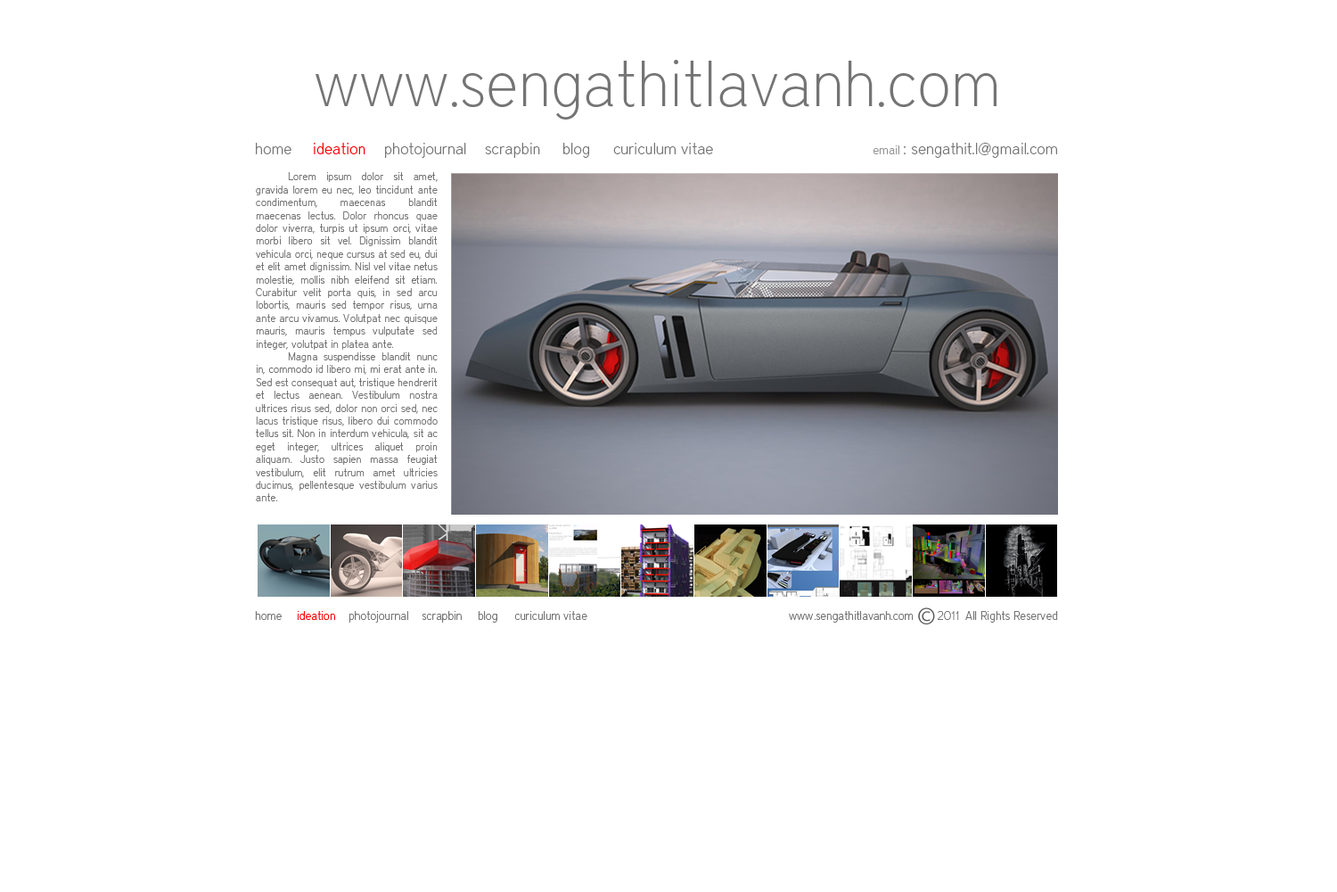
<style>
.page{position:relative;width:1337px;height:892px;background:#ffffff}
.page>*{position:absolute;margin:0}
.t1{font:64.2px "DistrictThin";color:#747474}
.t2{font:16px "DistrictThin";color:#747474}
.t3{font:16px "DistrictThin";color:#ff0000}
.t4{font:12.5px "DistrictThin";color:#939393}
.t5{font:10.7px "DistrictThin";color:#747474}
.t6{font:11.6px "DistrictThin";color:#747474}
.t7{font:11.6px "DistrictThin";color:#ff0000}
</style>
<div class="page">
<p class="t1" style="left:316px;top:60px;width:681px;height:59px">www.sengathitlavanh.com</p>
<p class="t2" style="left:256px;top:143px;width:36px;height:11px">home</p>
<p class="t3" style="left:314px;top:143px;width:52px;height:11px">ideation</p>
<p class="t2" style="left:385px;top:143px;width:81px;height:15px">photojournal</p>
<p class="t2" style="left:485px;top:143px;width:55px;height:15px">scrapbin</p>
<p class="t2" style="left:563px;top:143px;width:26px;height:15px">blog</p>
<p class="t2" style="left:613px;top:143px;width:100px;height:11px">curiculum vitae</p>
<p class="t2" style="left:873px;top:143px;width:184px;height:15px"><span class="t4">email </span>: sengathit.l@gmail.com</p>
<p class="t5" style="left:256px;top:172px;width:182px;height:329px;text-align:justify">Lorem ipsum dolor sit amet, gravida lorem eu nec, leo tincidunt ante condimentum, maecenas blandit maecenas lectus. Dolor rhoncus quae dolor viverra, turpis ut ipsum orci, vitae morbi libero sit vel. Dignissim blandit vehicula orci, neque cursus at sed eu, dui et elit amet dignissim. Nisl vel vitae netus molestie, mollis nibh eleifend sit etiam. Curabitur velit porta quis, in sed arcu lobortis, mauris sed tempor risus, urna ante arcu vivamus. Volutpat nec quisque mauris, mauris tempus vulputate sed integer, volutpat in platea ante.<br> Magna suspendisse blandit nunc in, commodo id libero mi, mi erat ante in. Sed est consequat aut, tristique hendrerit et lectus aenean. Vestibulum nostra ultrices risus sed, dolor non orci sed, nec lacus tristique risus, libero dui commodo tellus sit. Non in interdum vehicula, sit ac eget integer, ultrices aliquet proin aliquam. Justo sapien massa feugiat vestibulum, elit rutrum amet ultricies ducimus, pellentesque vestibulum varius ante.</p>
<p class="t6" style="left:255px;top:611px;width:27px;height:9px">home</p>
<p class="t7" style="left:298px;top:611px;width:37px;height:9px">ideation</p>
<p class="t6" style="left:349px;top:611px;width:59px;height:11px">photojournal</p>
<p class="t6" style="left:422px;top:611px;width:40px;height:11px">scrapbin</p>
<p class="t6" style="left:478px;top:611px;width:20px;height:11px">blog</p>
<p class="t6" style="left:514px;top:611px;width:74px;height:9px">curiculum vitae</p>
<p class="t6" style="left:789px;top:611px;width:269px;height:11px">www.sengathitlavanh.com       2011  All Rights Reserved</p>
</div>
